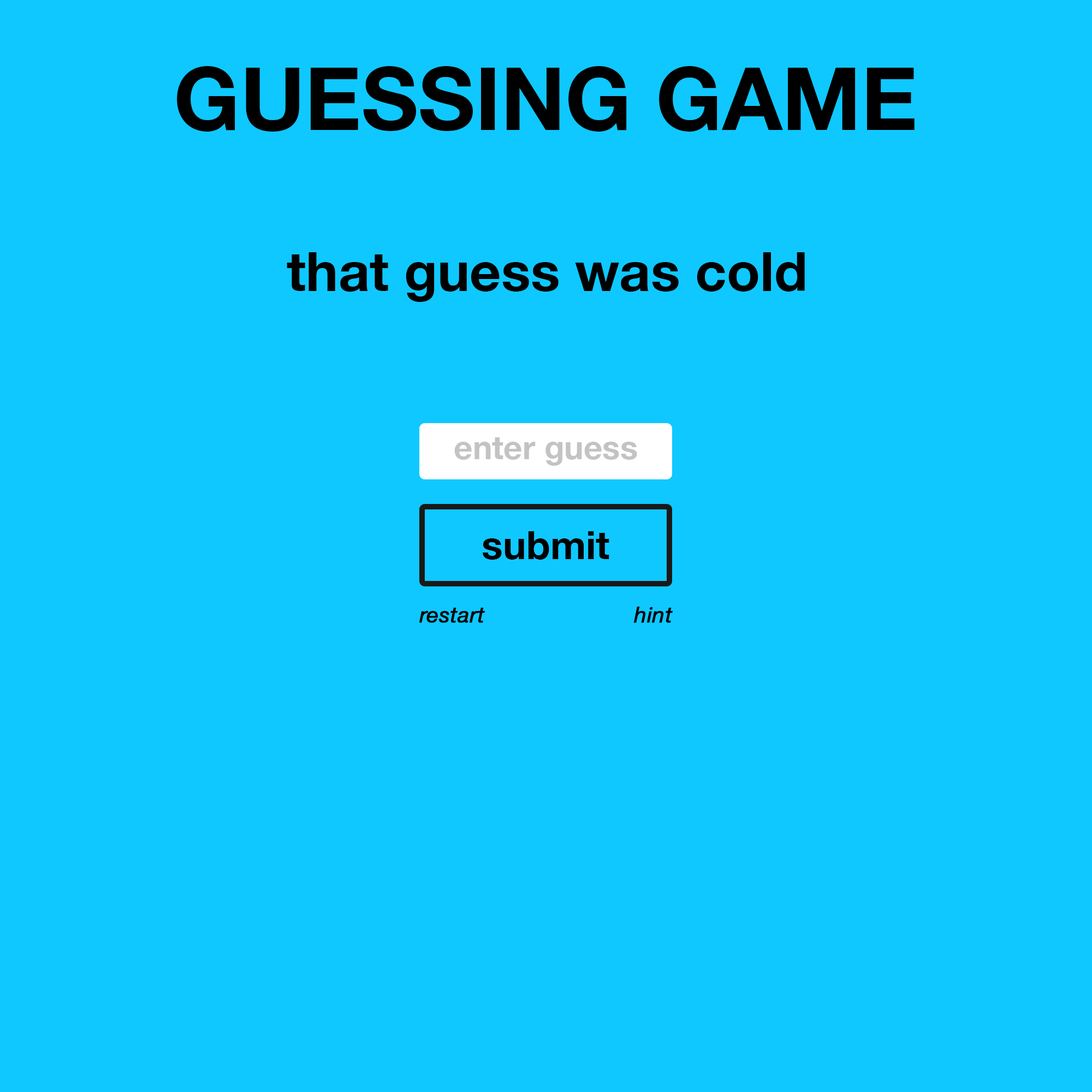
<style>
.page{position:relative;width:1092px;height:1092px;background:#0fc8ff}
.page>*{position:absolute;margin:0}
.t1{font:87.4px "HelveticaNeue-Bold";color:#000000}
.t2{font:54.6px "HelveticaNeue-Bold";color:#000000}
.t3{font:32.8px "HelveticaNeue-Bold";color:#c3c3c3}
.t4{font:39.3px "HelveticaNeue-Bold";color:#000000}
.t5{font:21.8px "HelveticaNeue-Italic";color:#000000;font-weight:bold}
</style>
<div class="page">
<p class="t1" style="left:177px;top:66px;width:738px;height:66px">GUESSING GAME</p>
<p class="t2" style="left:287px;top:252px;width:518px;height:50px">that guess was cold</p>
<p class="t3" style="left:454px;top:437px;width:183px;height:29px">enter guess</p>
<p class="t4" style="left:483px;top:531px;width:126px;height:29px">submit</p>
<p class="t5" style="left:419px;top:608px;width:66px;height:15px">restart</p>
<p class="t5" style="left:633px;top:607px;width:40px;height:16px">hint</p>
</div>
